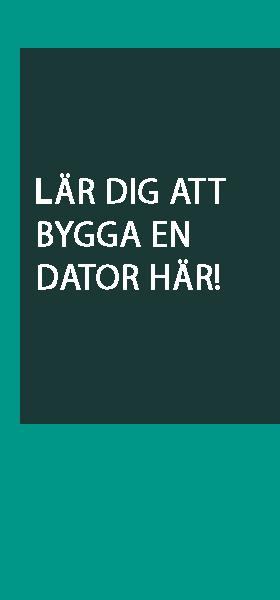
<style>
.page{position:relative;width:280px;height:600px;background:#1a3836}
.page>*{position:absolute;margin:0}
.t1{font:36px "MyriadPro-Regular";color:#ffffff;font-weight:bold;scale:0.96 1}
.t2{font:36px "FSPDEMO-CodeProRegular";color:#ffffff;font-weight:bold;scale:0.96 1}
</style>
<div class="page">
<p class="t1" style="left:36px;top:173px;width:190px;height:117px"><span class="t2">L</span>ÄR DIG ATT<br>BYGGA EN<br>DATOR HÄR!</p>
</div>
